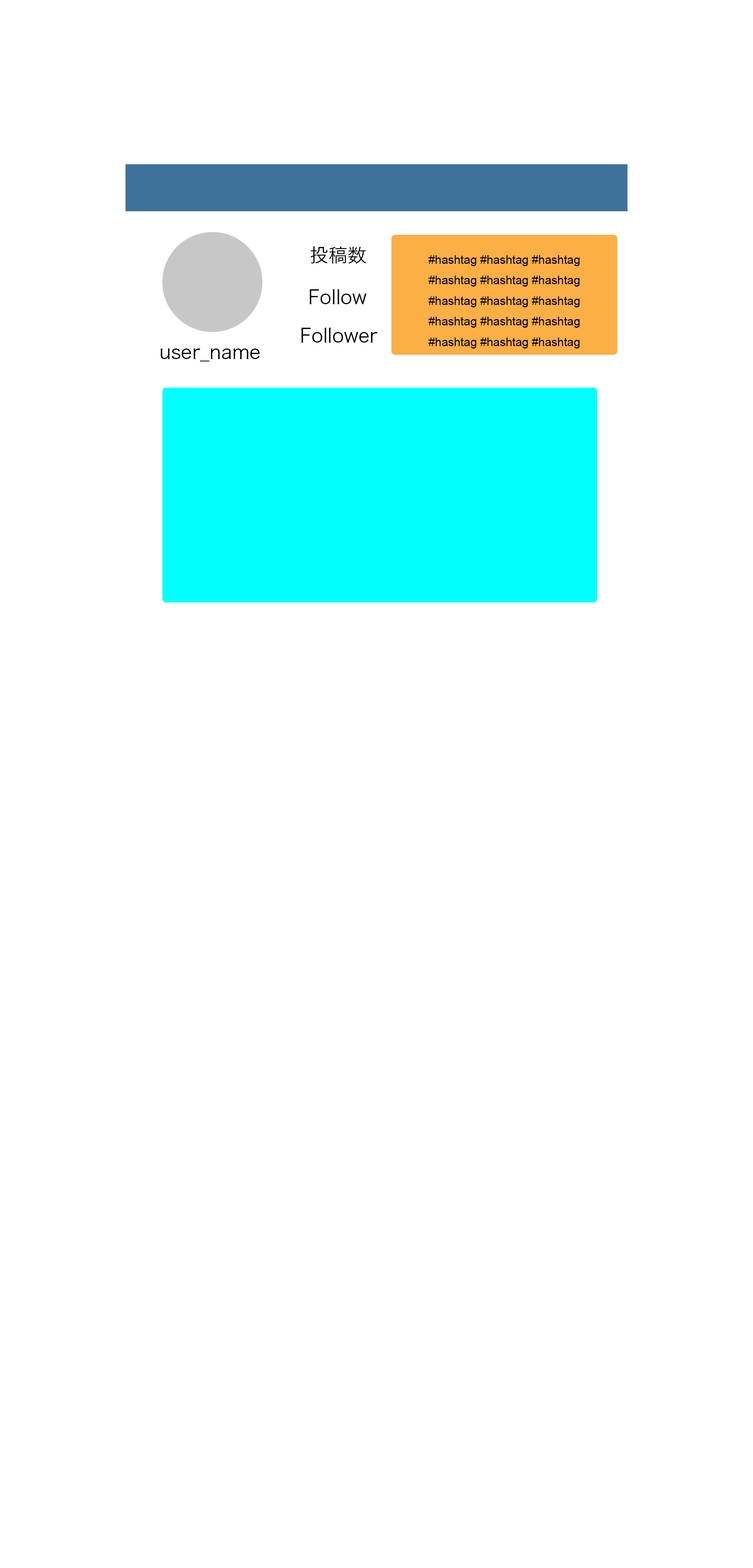
<style>
.page{position:relative;width:753px;height:1568px;background:#ffffff}
.page>*{position:absolute;margin:0}
.t1{font:18.8px "HiraKakuProN-W3";color:#000000}
.t2{font:11.8px "ArialMT";color:#000000}
</style>
<div class="page">
<p class="t1" style="left:310px;top:246px;width:56px;height:18px;text-align:center">投稿数<br>v</p>
<p class="t2" style="left:428px;top:255px;width:151px;height:93px;text-align:center">#hashtag #hashtag #hashtag<br>#hashtag #hashtag #hashtag<br>#hashtag #hashtag #hashtag<br>#hashtag #hashtag #hashtag<br>#hashtag #hashtag #hashtag</p>
<p class="t1" style="left:309px;top:289px;width:58px;height:15px">Follow</p>
<p class="t1" style="left:301px;top:327px;width:76px;height:16px;text-align:center">Follower<br><br>vvvv</p>
<p class="t1" style="left:160px;top:348px;width:100px;height:13px">user_name</p>
</div>
